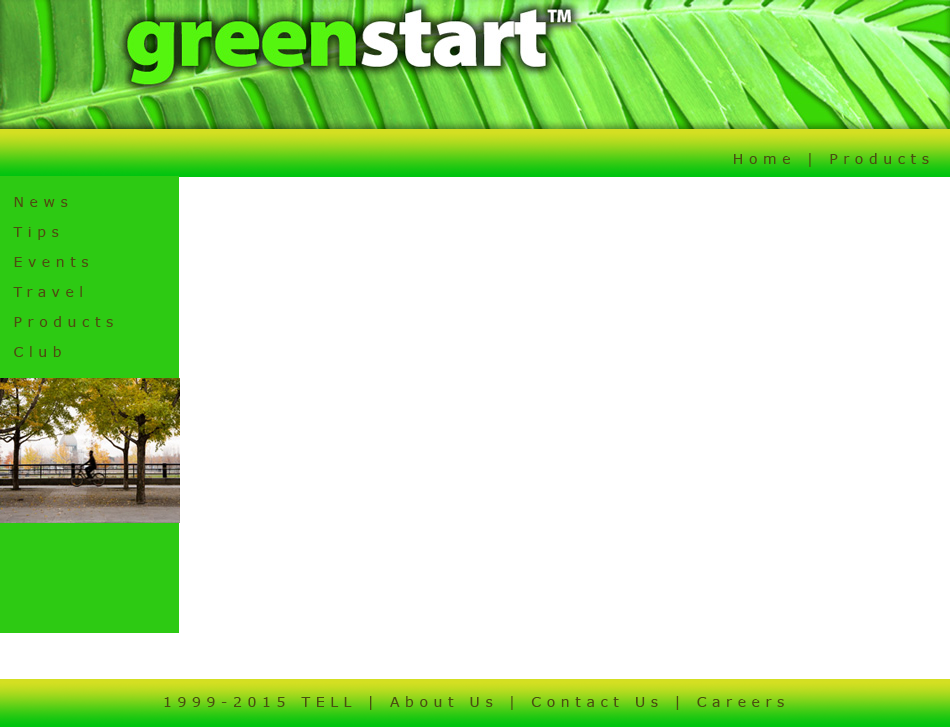
<style>
.page{position:relative;width:950px;height:727px;background:#ffffff}
.page>*{position:absolute;margin:0}
.t1{font:14px "Verdana";letter-spacing:0.4em;color:#4b4f11}
.t2{font:14px/30px "Verdana";letter-spacing:0.4em;color:#4b4f11}
</style>
<div class="page">
<p class="t1" style="left:734px;top:153px;width:195px;height:14px">Home | Products</p>
<p class="t2" style="left:13px;top:197px;width:100px;height:160px">News<br>Tips<br>Events<br>Travel<br>Products<br>Club</p>
<p class="t1" style="left:164px;top:696px;width:620px;height:14px">1999-2015 TELL | About Us | Contact Us | Careers</p>
</div>
